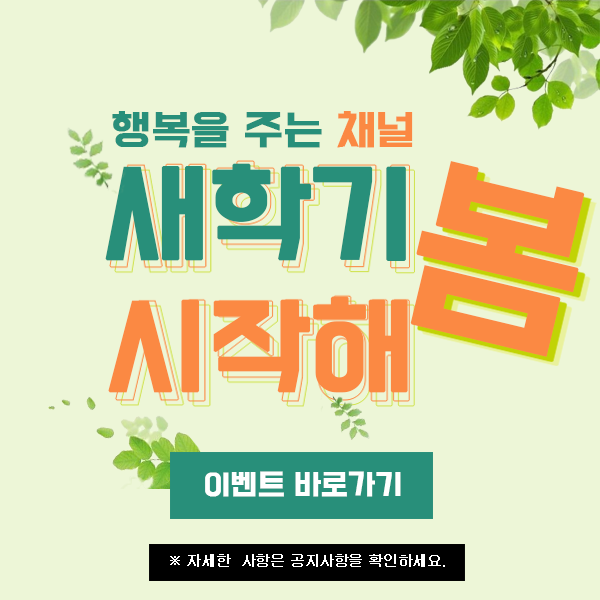
<style>
.page{position:relative;width:600px;height:600px;background:#edf6d7}
.page>*{position:absolute;margin:0}
.t1{font:36.6px "BMDoHyeon";letter-spacing:-0.025em;color:#288f7a;font-weight:bold;scale:1.13 1}
.t2{font:36.6px "BMDoHyeon";letter-spacing:-0.025em;color:#fb8943;font-weight:bold;scale:1.13 1}
.t3{font:96.9px/130px "BMDoHyeon";letter-spacing:-0.045em;color:#288f7a;font-weight:bold;scale:1.13 1}
.t4{font:95px "BMDoHyeon";letter-spacing:-0.025em;color:#fb8943;font-weight:bold;scale:1.13 1}
.t5{font:174.7px "BMDoHyeon";letter-spacing:-0.025em;color:#fb8943;font-weight:bold;scale:1.06 1}
.t6{font:25px "BMDoHyeon";letter-spacing:-0.025em;color:#ffffff;font-weight:bold;scale:1.13 1}
.t7{font:14px "Gulim";letter-spacing:-0.025em;color:#ffffff;font-weight:bold}
</style>
<div class="page">
<p class="t1" style="left:105px;top:111px;width:308px;height:282px;text-align:center">행복을 주는 <span class="t2">채널<br></span><span class="t3">새학기<br></span><span class="t4">시작해</span></p>
<p class="t5" style="left:410px;top:161px;width:175px;height:196px;rotate:13deg">봄</p>
<p class="t6" style="left:205px;top:471px;width:196px;height:26px">이벤트 바로가기</p>
<p class="t7" style="left:170px;top:554px;width:275px;height:13px">※ 자세한  사항은 공지사항을 확인하세요.</p>
</div>
